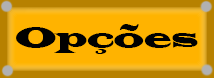
<style>
.page{position:relative;width:214px;height:78px;background:#ffb300}
.page>*{position:absolute;margin:0}
.t1{font:30px "LatinWide";color:#010101}
</style>
<div class="page">
<p class="t1" style="left:16px;top:24px;width:182px;height:30px">Opções</p>
</div>
